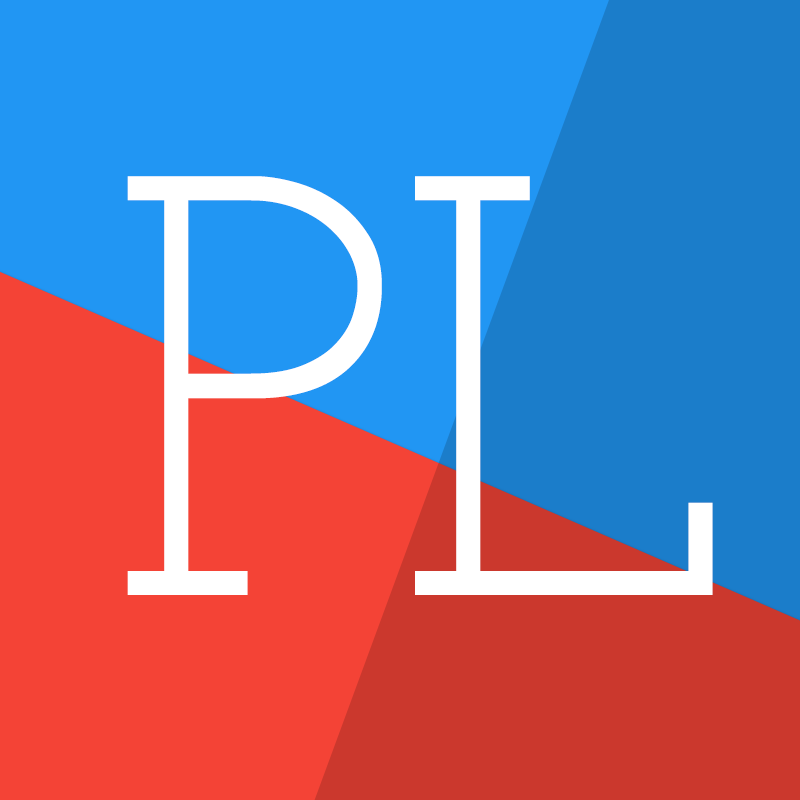
<style>
.page{position:relative;width:800px;height:800px;background:#2196f3}
.page>*{position:absolute;margin:0}
.t1{font:598.2px "JosefinSlab";color:#ffffff}
</style>
<div class="page">
<p class="t1" style="left:127px;top:176px;width:586px;height:419px">PL</p>
</div>
